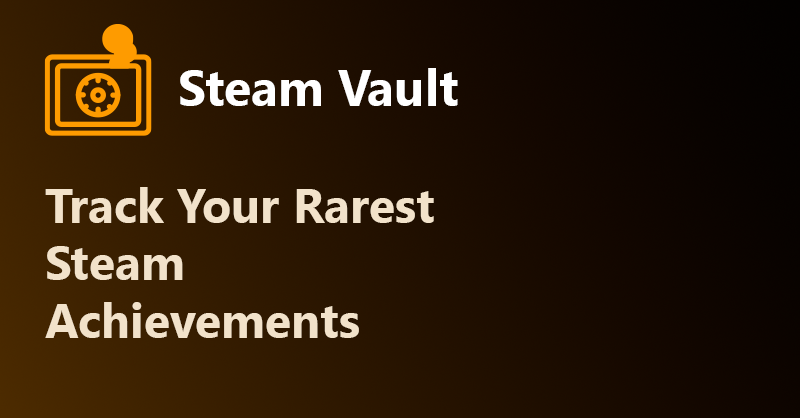
<style>
.page{position:relative;width:800px;height:418px}
.page>*{position:absolute;margin:0}
.t1{font:50px "SegoeUI-Bold";color:#ffffff}
.t2{font:48px "SegoeUI-Bold";color:#f2e2ca}
</style>
<div class="page">
<p class="t1" style="left:180px;top:68px;width:278px;height:38px">Steam Vault</p>
<p class="t2" style="left:45px;top:187px;width:389px;height:151px">Track Your Rarest Steam Achievements</p>
</div>
